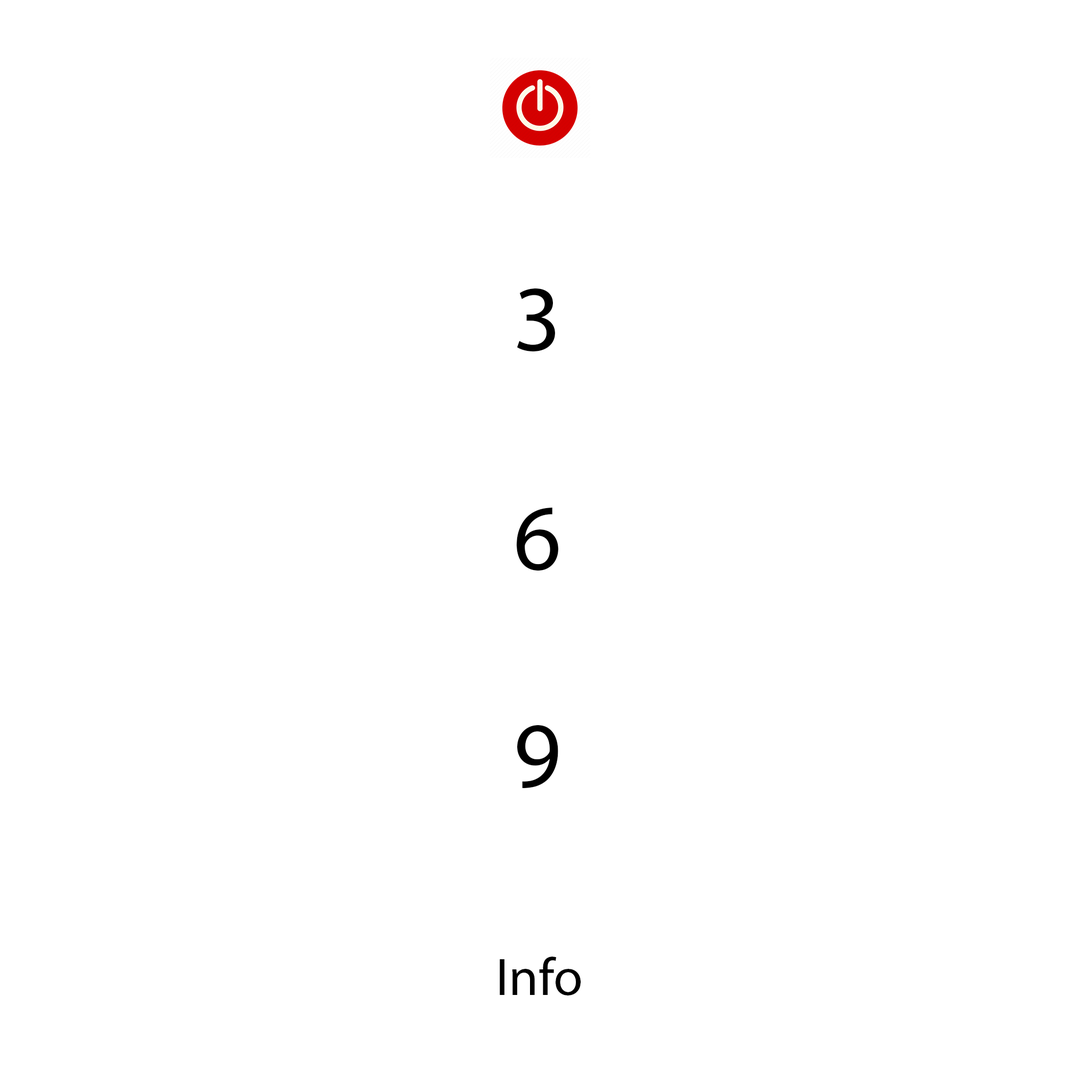
<style>
.page{position:relative;width:1092px;height:1092px;background:#ffffff}
.page>*{position:absolute;margin:0}
.t1{font:93.3px "MyriadPro-Regular";color:#000000}
.t2{font:53.3px "MyriadPro-Regular";color:#000000}
</style>
<div class="page">
<p class="t1" style="left:517px;top:288px;width:38px;height:64px">3</p>
<p class="t1" style="left:517px;top:508px;width:41px;height:63px">6</p>
<p class="t1" style="left:517px;top:725px;width:41px;height:63px">9</p>
<p class="t2" style="left:500px;top:957px;width:81px;height:38px">Info</p>
</div>
